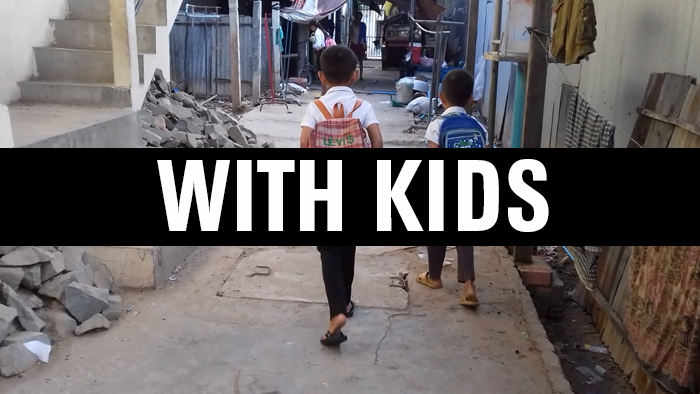
<style>
.page{position:relative;width:700px;height:394px}
.page>*{position:absolute;margin:0}
.t1{font:100px "AGBuchCondensedBQ-Medium";color:#fefefe}
</style>
<div class="page">
<p class="t1" style="left:157px;top:159px;width:392px;height:73px">WITH KIDS</p>
</div>
